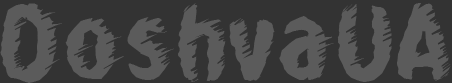
<style>
.page{position:relative;width:452px;height:83px;background:#333333}
.page>*{position:absolute;margin:0}
.t1{font:94px "WhirlCyrillic";color:#5b5b5b}
</style>
<div class="page">
<p class="t1" style="left:0px;top:3px;width:451px;height:80px">DoshvaUA</p>
</div>
